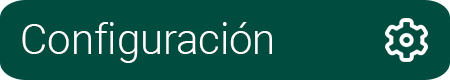
<style>
.page{position:relative;width:450px;height:80px;background:#004d40}
.page>*{position:absolute;margin:0}
.t1{font:41.7px "Roboto-Light";color:#ffffff}
</style>
<div class="page">
<p class="t1" style="left:22px;top:22px;width:250px;height:41px">Configuración</p>
</div>
